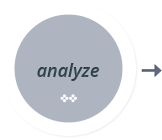
<style>
.page{position:relative;width:162px;height:140px;background:#ffffff}
.page>*{position:absolute;margin:0}
.t1{font:18px "OpenSans-SemiboldItalic";color:#30444c}
</style>
<div class="page">
<p class="t1" style="left:37px;top:63px;width:63px;height:18px">analyze</p>
</div>
